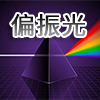
<style>
.page{position:relative;width:100px;height:100px}
.page>*{position:absolute;margin:0}
.t1{font:24px "SourceHanSansSC-Regular";letter-spacing:0.035em;font-weight:bold}
</style>
<div class="page">
<p class="t1" style="left:11px;top:14px;width:75px;height:23px">偏振光</p>
</div>
